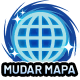
<style>
.page{position:relative;width:80px;height:80px;background:#ffffff}
.page>*{position:absolute;margin:0}
.t1{font:12px "Barlow-Bold"}
</style>
<div class="page">
<p class="t1" style="left:4px;top:65px;width:72px;height:9px">MUDAR MAPA</p>
</div>
